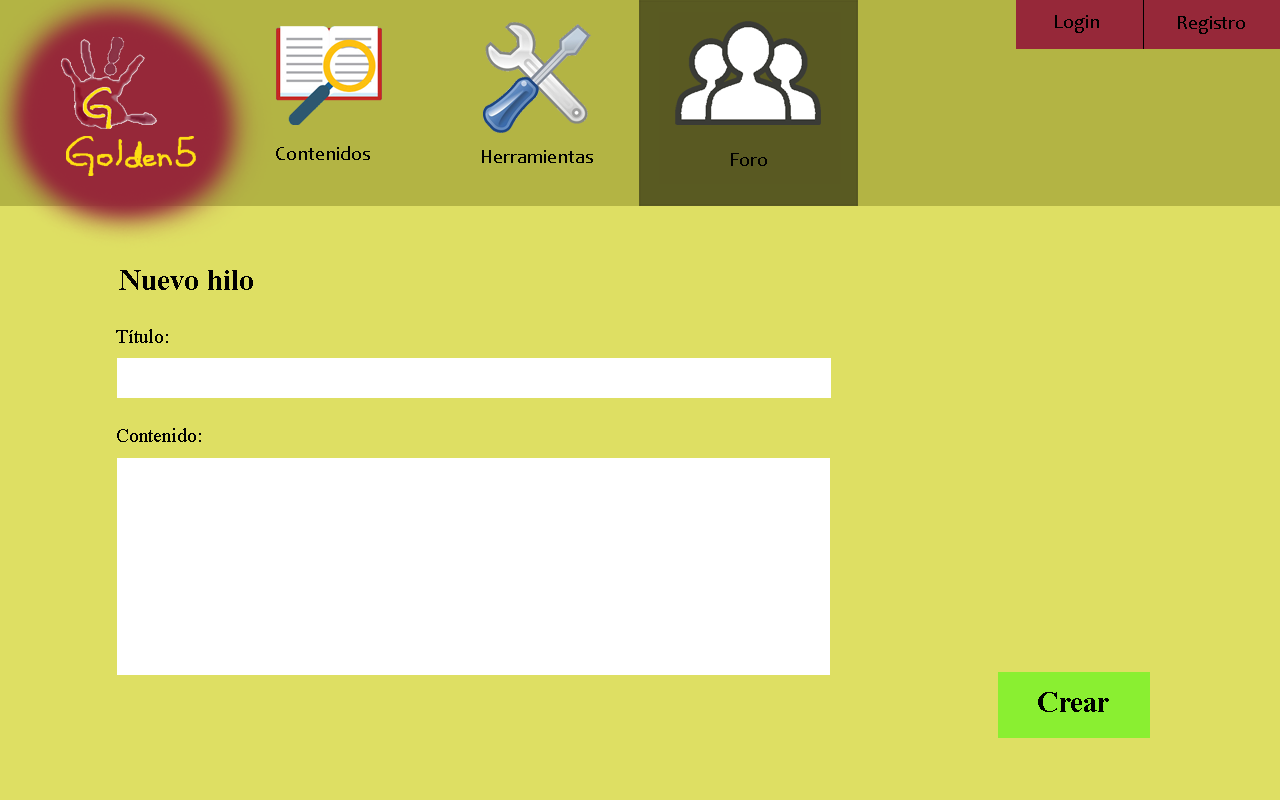
<style>
.page{position:relative;width:1280px;height:800px;background:#dedf63}
.page>*{position:absolute;margin:0}
.t1{font:20px "Candara";color:#000000}
.t2{font:30px "TimesNewRomanPS-BoldMT";color:#000000}
.t3{font:20px "TimesNewRomanPSMT";color:#000000}
</style>
<div class="page">
<p class="t1" style="left:1055px;top:15px;width:44px;height:18px">Login</p>
<p class="t1" style="left:1178px;top:16px;width:67px;height:18px">Registro</p>
<p class="t1" style="left:276px;top:146px;width:94px;height:14px">Contenidos</p>
<p class="t1" style="left:482px;top:150px;width:111px;height:13px">Herramientas</p>
<p class="t1" style="left:731px;top:153px;width:36px;height:13px">Foro</p>
<p class="t2" style="left:119px;top:270px;width:134px;height:20px">Nuevo hilo</p>
<p class="t3" style="left:116px;top:329px;width:52px;height:14px">Título:</p>
<p class="t3" style="left:117px;top:428px;width:84px;height:14px">Contenido:</p>
<p class="t2" style="left:1038px;top:692px;width:71px;height:20px">Crear</p>
</div>
